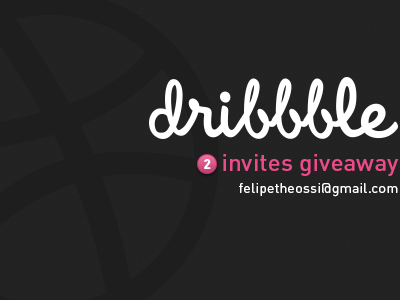
<style>
.page{position:relative;width:400px;height:300px;background:#1e1e1e}
.page>*{position:absolute;margin:0}
.t1{font:13px "DINPro-Black";letter-spacing:0.01em;color:#ffffff}
.t2{font:14px/22px "DINPro-Regular";letter-spacing:0.02em;color:#ffffff}
.t3{font:24px/22px "DINPro-Medium";letter-spacing:0.01em;color:#ea4c89}
</style>
<div class="page">
<p class="t1" style="left:204px;top:159px;width:7px;height:10px">2</p>
<p class="t2" style="left:223px;top:154px;width:176px;height:43px;text-align:right"><span class="t3">invites giveaway<br></span>felipetheossi@gmail.com</p>
</div>
